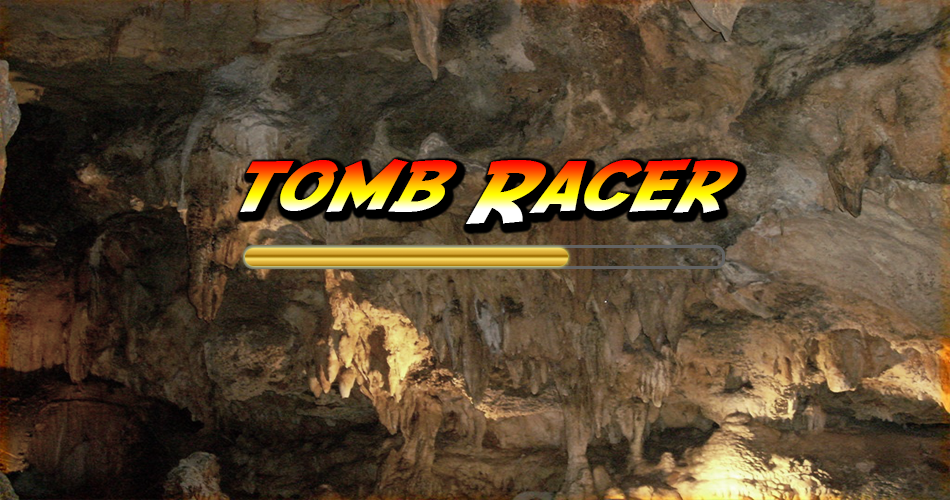
<style>
.page{position:relative;width:950px;height:500px}
.page>*{position:absolute;margin:0}
.t1{font:72px "SFFedora";letter-spacing:-0.005em;scale:1.2 1}
</style>
<div class="page">
<p class="t1" style="left:240px;top:159px;width:498px;height:65px">tomb Racer</p>
</div>
